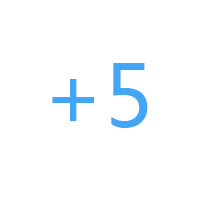
<style>
.page{position:relative;width:200px;height:200px;background:#ffffff}
.page>*{position:absolute;margin:0}
.t1{font:84px "MicrosoftYaHei";color:#42a5f5}
</style>
<div class="page">
<p class="t1" style="left:52px;top:63px;width:96px;height:65px">+5</p>
</div>
